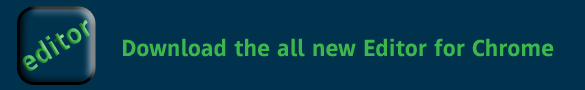
<style>
.page{position:relative;width:585px;height:90px;background:#00324d}
.page>*{position:absolute;margin:0}
.t1{font:29.4px "MayberryPro-Semibold";letter-spacing:0.005em}
.t2{font:24px "MayberryPro-Semibold";letter-spacing:0.005em;color:#3bb74c}
</style>
<div class="page">
<p class="t1" style="left:22px;top:19px;width:68px;height:52px;rotate:-31deg">editor</p>
<p class="t2" style="left:123px;top:38px;width:431px;height:19px">Download the all new Editor for Chrome</p>
</div>
